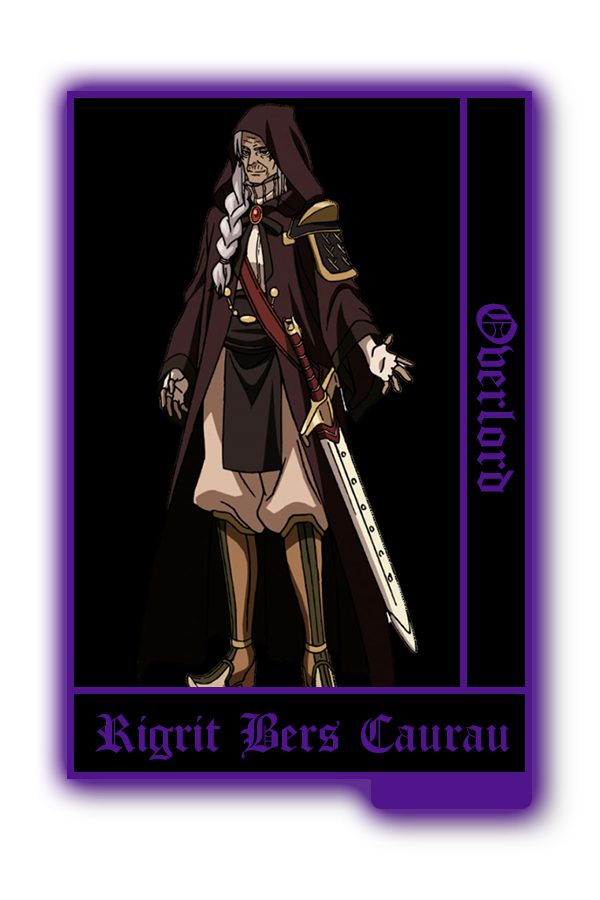
<style>
.page{position:relative;width:600px;height:900px;background:#000000}
.page>*{position:absolute;margin:0}
.t1{font:61.5px "OldLondon";color:#51158b}
.t2{font:58.5px "OldLondon";color:#51158b}
</style>
<div class="page">
<p class="t1" style="left:476px;top:303px;width:42px;height:189px;rotate:90deg">Overlord</p>
<p class="t2" style="left:95px;top:713px;width:415px;height:47px">Rigrit Bers Caurau</p>
</div>
